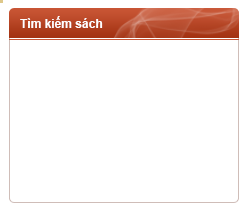
<style>
.page{position:relative;width:240px;height:203px;background:#ffffff}
.page>*{position:absolute;margin:0}
.t1{font:12px "Arial-BoldMT";color:#ffffff}
</style>
<div class="page">
<p class="t1" style="left:20px;top:16px;width:83px;height:12px">Tìm kiếm sách</p>
</div>
